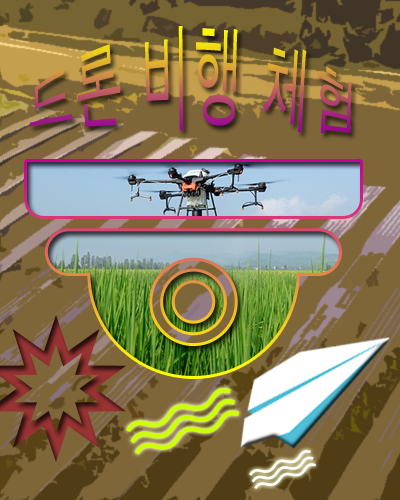
<style>
.page{position:relative;width:400px;height:500px;background:#7e6639}
.page>*{position:absolute;margin:0}
.t1{font:50px "Dotum"}
</style>
<div class="page">
<p class="t1" style="left:30px;top:26px;width:322px;height:108px;text-align:center">드론 비행 체험</p>
</div>
